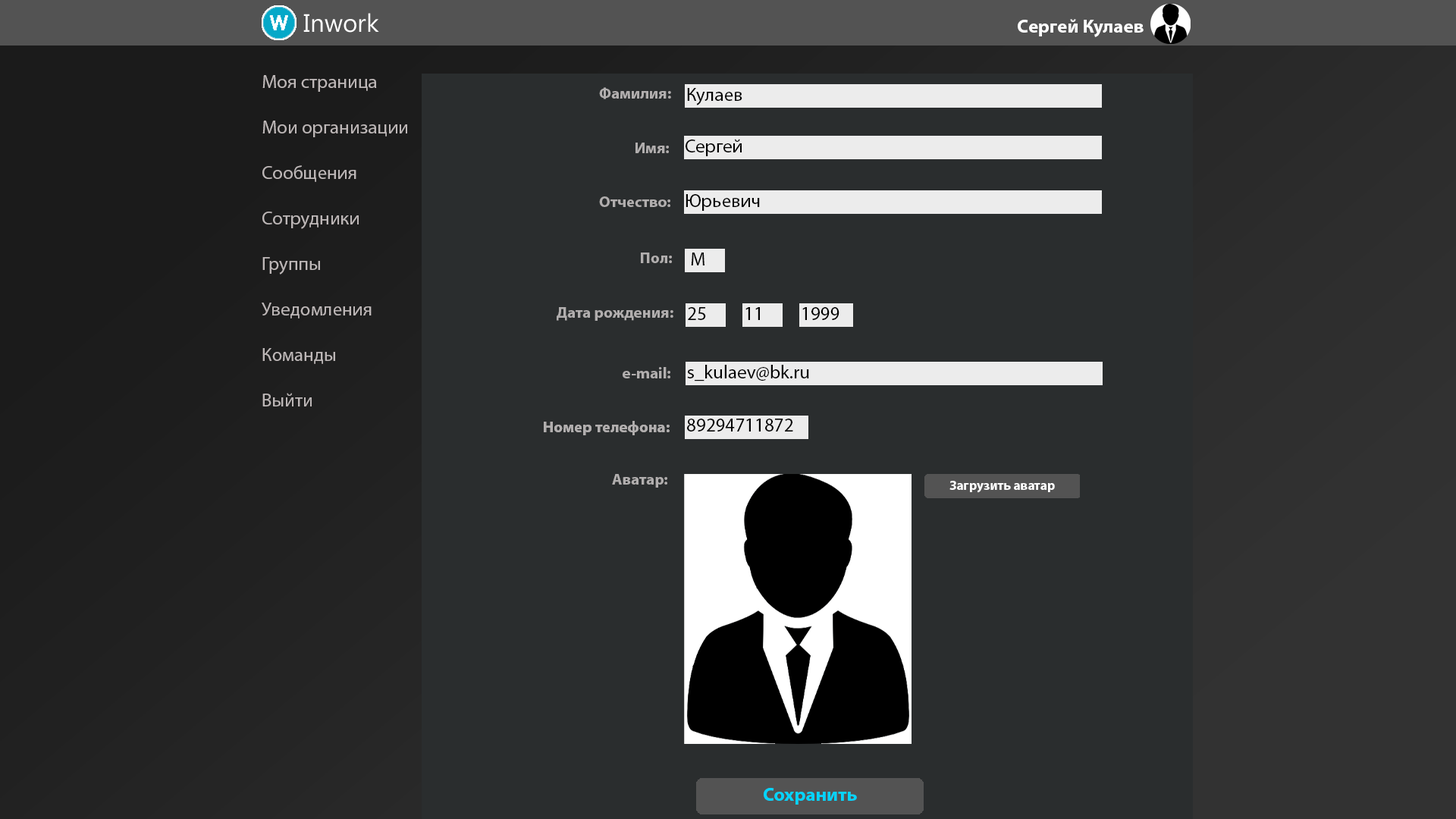
<style>
.page{position:relative;width:1456px;height:819px;background:#2a2d2e}
.page>*{position:absolute;margin:0}
.t1{font:19px "MyriadPro-Bold";color:#ffffff}
.t2{font:19px "MyriadPro-Regular";color:#bdb7b7}
.t3{font:15.8px "MyriadPro-Bold";color:#b1aeae}
.t4{font:19px "MyriadPro-Regular";color:#010101}
.t5{font:13.1px "MyriadPro-Bold";color:#ffffff}
.t6{font:19px "MyriadPro-Bold";color:#01d5ff}
</style>
<div class="page">
<p class="t1" style="left:1018px;top:19px;width:126px;height:18px">Сергей Кулаев</p>
<p class="t2" style="left:262px;top:75px;width:145px;height:331px">Моя страница<br><br>Мои организации<br><br>Сообщения<br><br>Сотрудники<br><br>Группы<br><br>Уведомления<br><br>Команды<br><br>Выйти</p>
<p class="t3" style="left:599px;top:87px;width:72px;height:12px">Фамилия:</p>
<p class="t4" style="left:687px;top:88px;width:55px;height:17px">Кулаев</p>
<p class="t3" style="left:635px;top:143px;width:34px;height:10px">Имя:</p>
<p class="t4" style="left:686px;top:139px;width:56px;height:17px">Сергей</p>
<p class="t3" style="left:599px;top:196px;width:71px;height:11px">Отчество:</p>
<p class="t4" style="left:686px;top:194px;width:74px;height:17px">Юрьевич</p>
<p class="t3" style="left:641px;top:253px;width:31px;height:10px">Пол:</p>
<p class="t4" style="left:691px;top:253px;width:13px;height:12px">М</p>
<p class="t3" style="left:557px;top:307px;width:116px;height:14px">Дата рождения:</p>
<p class="t4" style="left:688px;top:307px;width:18px;height:13px">25</p>
<p class="t4" style="left:745px;top:307px;width:15px;height:13px">11</p>
<p class="t4" style="left:802px;top:307px;width:37px;height:13px">1999</p>
<p class="t4" style="left:687px;top:365px;width:122px;height:16px">s_kulaev@bk.ru</p>
<p class="t3" style="left:623px;top:367px;width:47px;height:11px">e-mail:</p>
<p class="t3" style="left:544px;top:421px;width:126px;height:14px">Номер телефона:</p>
<p class="t3" style="left:544px;top:421px;width:126px;height:14px">Номер телефона:</p>
<p class="t4" style="left:687px;top:419px;width:106px;height:12px">89294711872</p>
<p class="t4" style="left:687px;top:419px;width:106px;height:12px">89294711872</p>
<p class="t3" style="left:612px;top:474px;width:55px;height:14px">Аватар:</p>
<p class="t5" style="left:949px;top:481px;width:106px;height:12px">Загрузить аватар</p>
<p class="t6" style="left:764px;top:788px;width:93px;height:17px">Сохранить</p>
</div>
